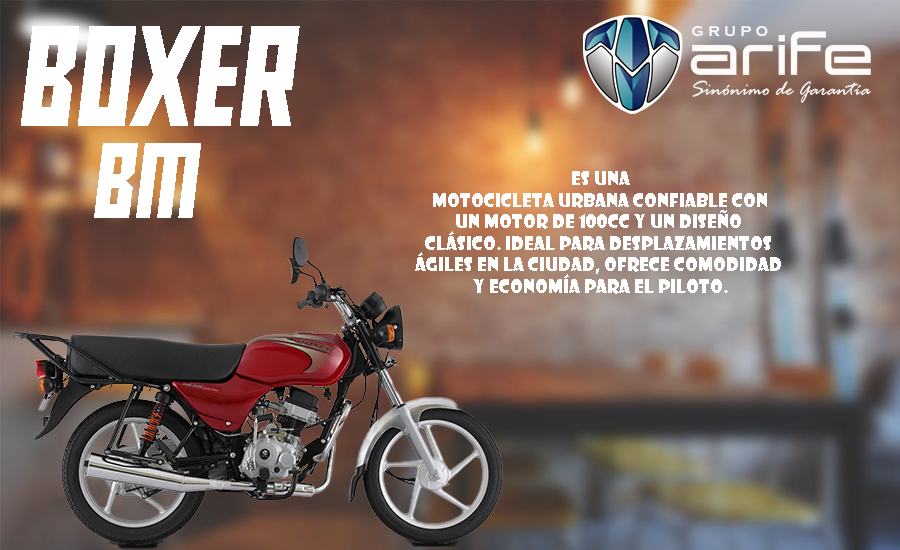
<style>
.page{position:relative;width:900px;height:550px}
.page>*{position:absolute;margin:0}
.t1{font:120px "Buran-USSR";color:#ffffff}
.t2{font:90px "Buran-USSR";color:#ffffff}
.t3{font:18px "ShowcardGothic-Reg";color:#ffffff}
</style>
<div class="page">
<p class="t1" style="left:21px;top:26px;width:279px;height:100px">BOXER</p>
<p class="t2" style="left:94px;top:143px;width:107px;height:75px">BM</p>
<p class="t3" style="left:415px;top:171px;width:366px;height:123px;text-align:center">Es una<br> motocicleta urbana confiable con <br>un motor de 100cc y un diseño <br>clásico. Ideal para desplazamientos <br>ágiles en la ciudad, ofrece comodidad <br>y economía para el piloto.</p>
</div>
